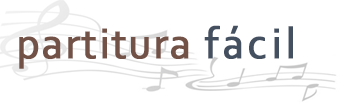
<style>
.page{position:relative;width:349px;height:107px;background:#ffffff}
.page>*{position:absolute;margin:0}
.t1{font:45px "Corbel";letter-spacing:0.025em;color:#725147;font-weight:bold;scale:0.96 1}
.t2{font:45px "Corbel";letter-spacing:0.075em;color:#444f5f;font-weight:bold;scale:0.96 1}
</style>
<div class="page">
<p class="t1" style="left:19px;top:25px;width:274px;height:44px">partitura <span class="t2">fácil</span></p>
</div>
